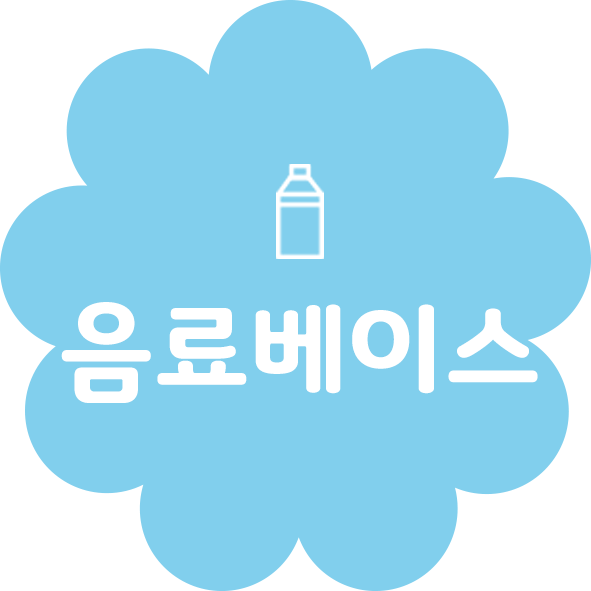
<style>
.page{position:relative;width:591px;height:591px;background:#81cfed}
.page>*{position:absolute;margin:0}
.t1{font:100px "MaeilRounded";color:#ffffff;font-weight:bold}
</style>
<div class="page">
<p class="t1" style="left:61px;top:302px;width:477px;height:101px">음료베이스</p>
</div>
